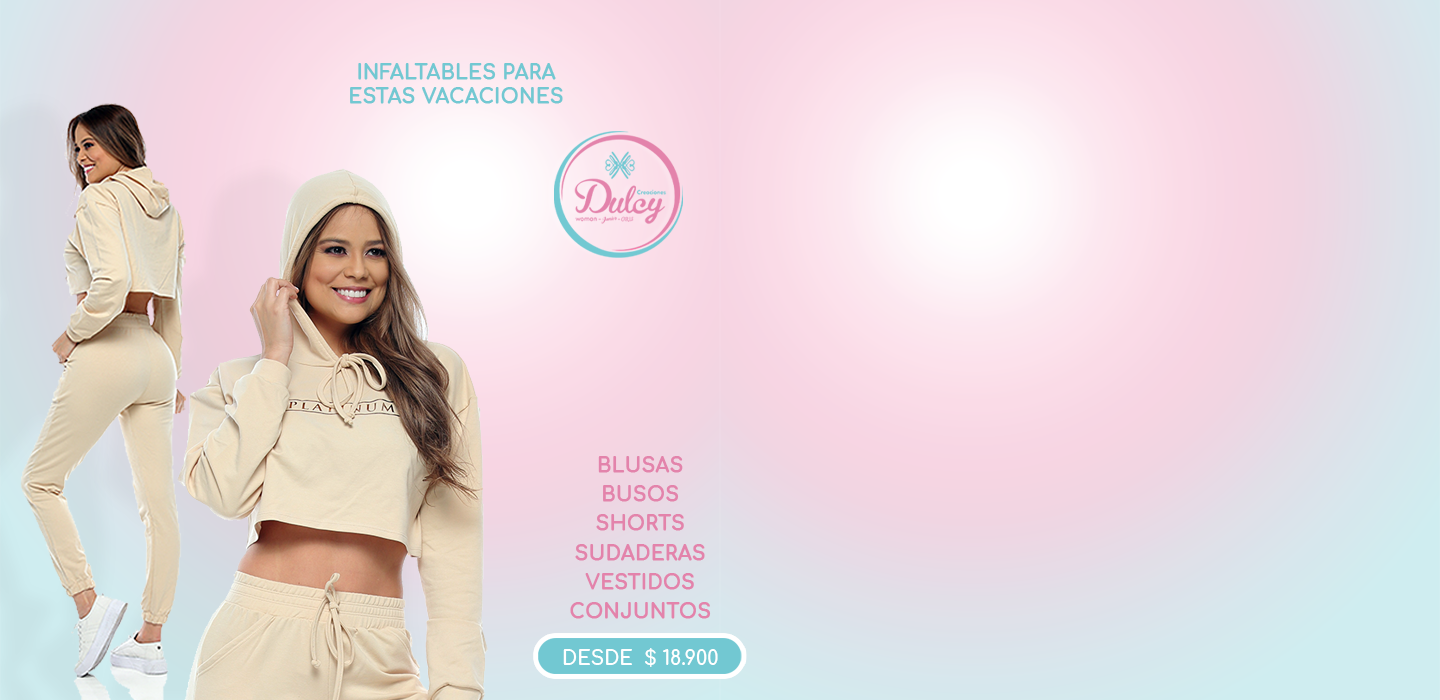
<style>
.page{position:relative;width:1440px;height:700px}
.page>*{position:absolute;margin:0}
.t1{font:19.4px "Comfortaa-Bold";color:#72c8d2;text-transform:uppercase;font-weight:bold}
.t2{font:19.4px/29.2px "Comfortaa-Bold";color:#e383ab;text-transform:uppercase;font-weight:bold}
.t3{font:19.4px "Comfortaa-Bold";color:#ffffff;text-transform:uppercase}
</style>
<div class="page">
<p class="t1" style="left:350px;top:63px;width:213px;height:41px;text-align:center">infaltables para<br>estas vacaciones</p>
<p class="t2" style="left:563px;top:456px;width:155px;height:211px;text-align:center">blusas<br>busos<br>shorts<br>sudaderas<br>vestidos<br>conjuntos<br><br><span class="t3">desde  $ 18.900</span></p>
</div>
